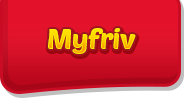
<style>
.page{position:relative;width:184px;height:98px;background:#e4112a}
.page>*{position:absolute;margin:0}
.t1{font:28px "PoetsenOne-Regular";letter-spacing:-0.025em}
</style>
<div class="page">
<p class="t1" style="left:48px;top:28px;width:88px;height:26px">Myfriv</p>
</div>
